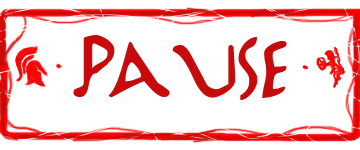
<style>
.page{position:relative;width:360px;height:150px;background:#ffffff}
.page>*{position:absolute;margin:0}
.t1{font:135px "MarathonII";color:#c50b0b}
</style>
<div class="page">
<p class="t1" style="left:73px;top:35px;width:214px;height:65px">Pause</p>
</div>
